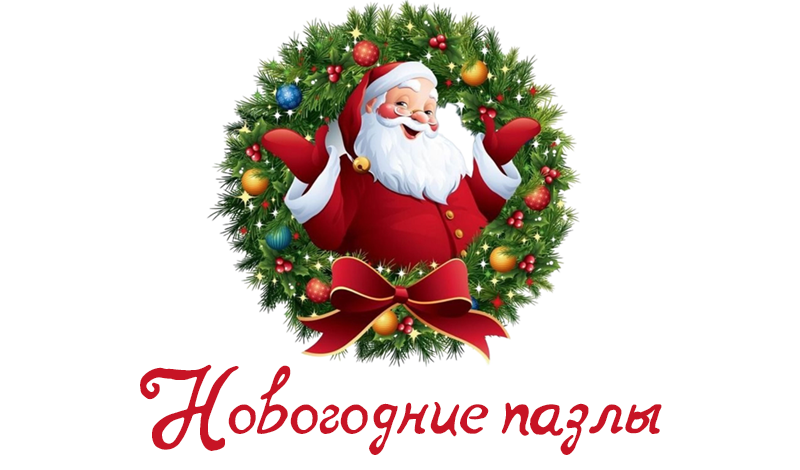
<style>
.page{position:relative;width:800px;height:470px;background:#ffffff}
.page>*{position:absolute;margin:0}
.t1{font:84.8px "notperfectregular";color:#c71425}
</style>
<div class="page">
<p class="t1" style="left:140px;top:364px;width:522px;height:91px">Новогодние пазлы</p>
</div>
